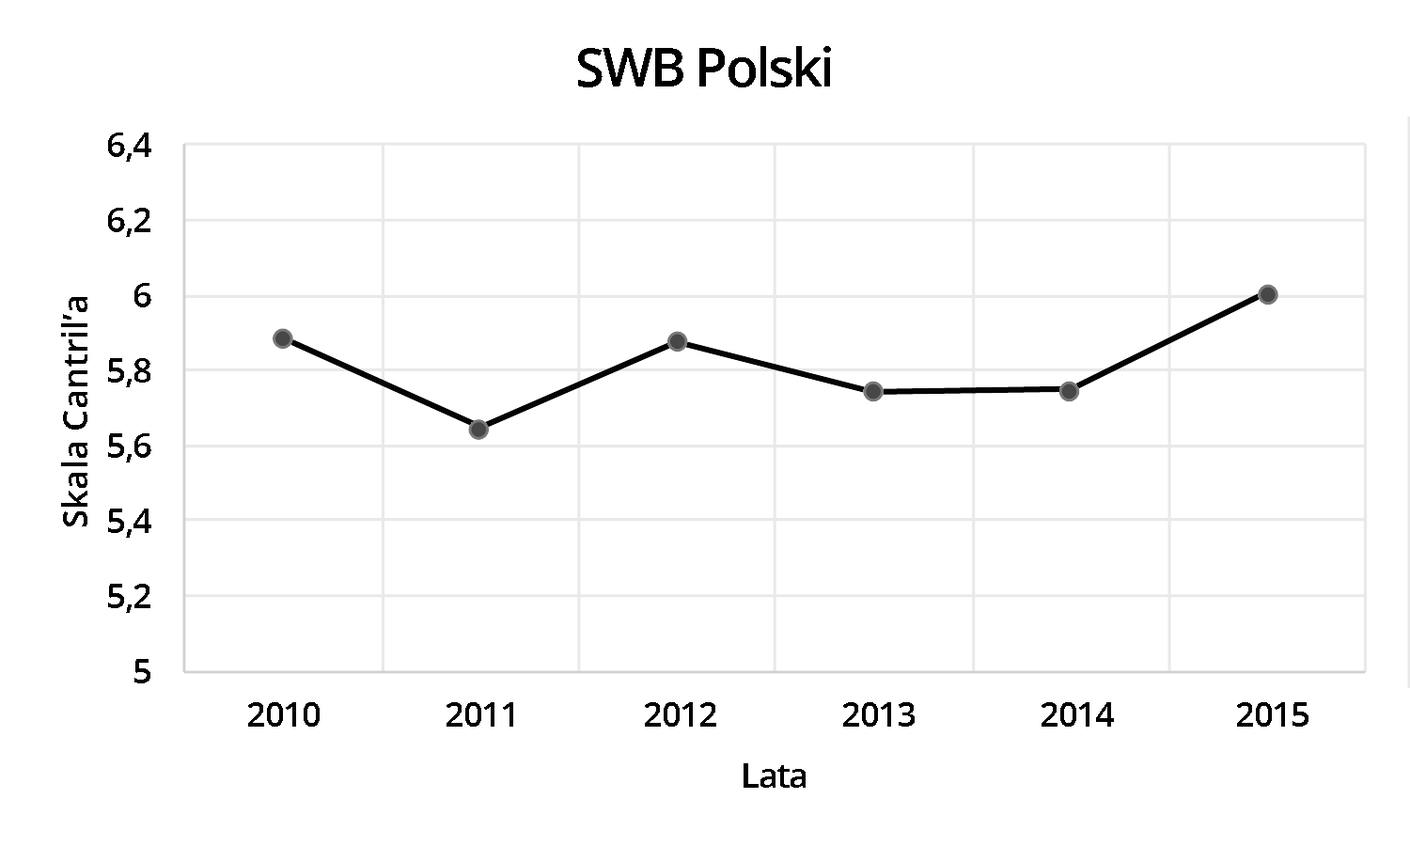
<style>
.page{position:relative;width:1410px;height:846px;background:#ffffff}
.page>*{position:absolute;margin:0}
.t1{font:54px "OpenSans-Semibold";letter-spacing:-0.05em;color:#000000}
.t2{font:35.1px "OpenSans-Semibold";letter-spacing:-0.05em;color:#000000}
.t3{font:35.1px "OpenSans-Semibold";letter-spacing:-0.01em;color:#000000}
</style>
<div class="page">
<p class="t1" style="left:578px;top:46px;width:253px;height:41px">SWB Polski</p>
<p class="t2" style="left:108px;top:133px;width:43px;height:29px">6,4</p>
<p class="t2" style="left:108px;top:208px;width:42px;height:29px">6,2</p>
<p class="t2" style="left:134px;top:283px;width:17px;height:24px">6</p>
<p class="t3" style="left:61px;top:297px;width:26px;height:229px;rotate:-90deg">Skala Cantril’a</p>
<p class="t2" style="left:108px;top:358px;width:42px;height:29px">5,8</p>
<p class="t2" style="left:108px;top:433px;width:43px;height:29px">5,6</p>
<p class="t2" style="left:108px;top:508px;width:43px;height:30px">5,4</p>
<p class="t2" style="left:108px;top:584px;width:42px;height:29px">5,2</p>
<p class="t2" style="left:134px;top:659px;width:16px;height:24px">5</p>
<p class="t2" style="left:248px;top:702px;width:72px;height:24px">2010</p>
<p class="t2" style="left:446px;top:702px;width:67px;height:24px">2011</p>
<p class="t2" style="left:645px;top:702px;width:71px;height:24px">2012</p>
<p class="t2" style="left:843px;top:702px;width:71px;height:24px">2013</p>
<p class="t2" style="left:1041px;top:702px;width:73px;height:24px">2014</p>
<p class="t2" style="left:1237px;top:702px;width:71px;height:24px">2015</p>
<p class="t2" style="left:743px;top:763px;width:62px;height:25px">Lata</p>
</div>
